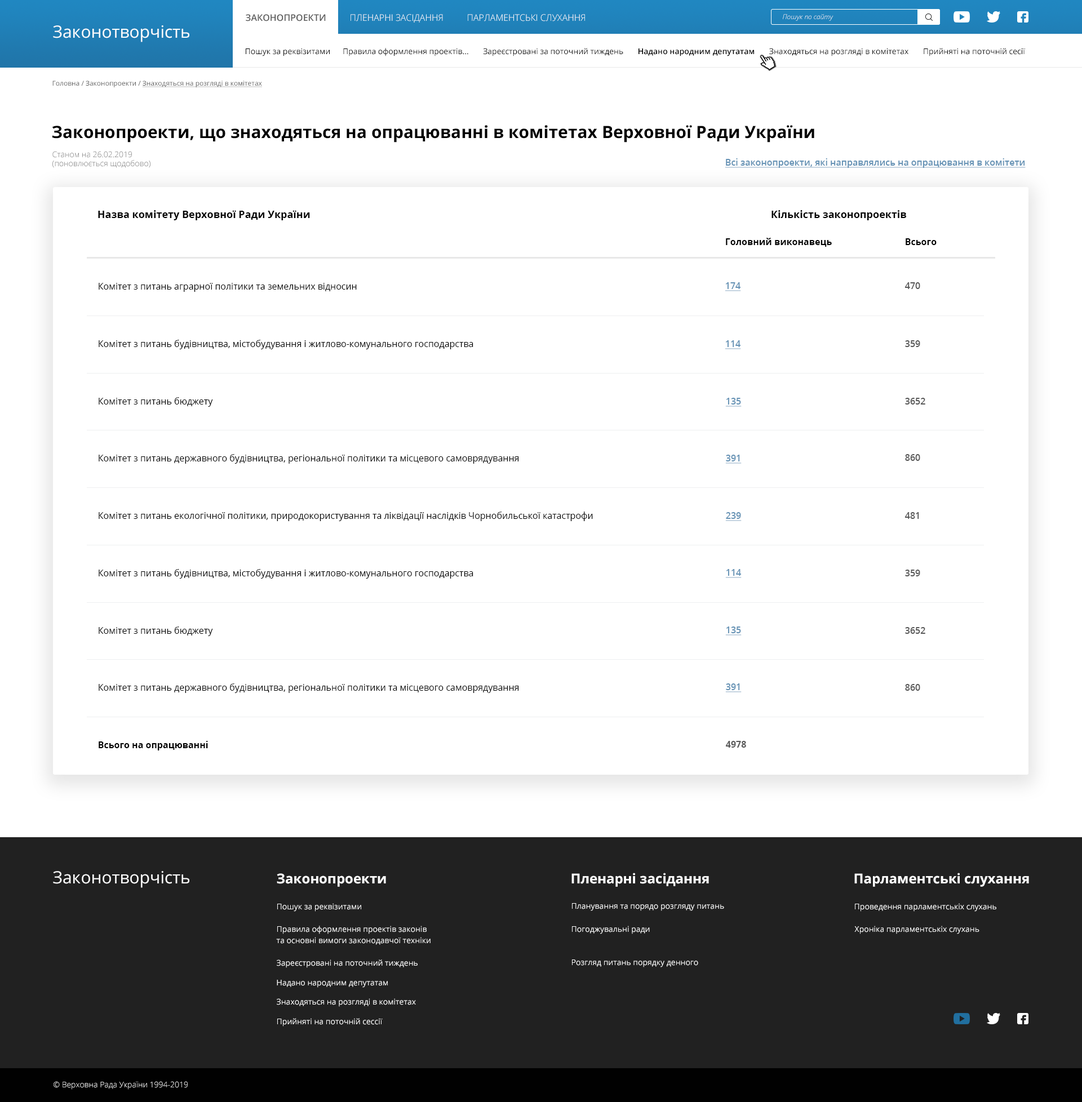
<style>
.page{position:relative;width:1082px;height:1102px;background:#ffffff}
.page>*{position:absolute;margin:0}
.t1{font:9px "OpenSans-SemiBold";color:#585858;text-transform:uppercase}
.t2{font:9px "OpenSans-Light";color:#ffffff;text-transform:uppercase}
.t3{font:6.8px "OpenSans-LightItalic";color:#ffffff}
.t4{font:16.9px "OpenSans-Regular";color:#ffffff}
.t5{font:7.9px "OpenSans-Regular";color:#000000}
.t6{font:7.9px "OpenSans-SemiBold";color:#000000}
.t7{font:6.8px "OpenSans-Regular";color:#585858;text-decoration:underline}
.t8{font:6.8px "OpenSans-Regular";color:#585858}
.t9{font:16.9px "OpenSans-Bold";color:#000000}
.t10{font:7.9px "OpenSans-Light";color:#737373}
.t11{font:9px "OpenSans-SemiBold";color:#6592b5;text-decoration:underline}
.t12{font:10.1px "OpenSans-Bold";color:#000000}
.t13{font:9px "OpenSans-Bold";color:#000000}
.t14{font:9px "OpenSans-Regular";color:#000000}
.t15{font:9px "OpenSans-SemiBold";color:#585858}
.t16{font:9px "OpenSans-Bold";color:#585858}
.t17{font:13.5px "OpenSans-Bold";color:#ffffff}
.t18{font:7.9px "OpenSans-Regular";color:#ffffff}
.t19{font:7.9px/11.3px "OpenSans-Regular";color:#ffffff}
.t20{font:7.9px/14.7px "OpenSans-Regular";color:#ffffff}
.t21{font:7.9px "OpenSans-Light";color:#ffffff}
</style>
<div class="page">
<p class="t1" style="left:246px;top:14px;width:80px;height:7px">Законопроекти</p>
<p class="t2" style="left:350px;top:14px;width:93px;height:9px">пленарні засідання</p>
<p class="t2" style="left:468px;top:14px;width:117px;height:7px">парламентські слухання</p>
<p class="t3" style="left:783px;top:14px;width:50px;height:7px">Пошук по сайту</p>
<p class="t4" style="left:53px;top:25px;width:136px;height:17px">Законотворчість</p>
<p class="t5" style="left:246px;top:48px;width:779px;height:8px">Пошук за реквізитами      Правила оформлення проектів...       Зареєстровані за поточний тиждень       <span class="t6">Надано народним депутатам</span>       Знаходяться на розгляді в комітетах       Прийняті на поточній сесії</p>
<p class="t7" style="left:52px;top:81px;width:210px;height:6px"><span class="t8">Головна / Законопроекти / </span>Знаходяться на розгляді в комітетах</p>
<p class="t9" style="left:52px;top:125px;width:762px;height:18px">Законопроекти, що знаходяться на опрацюванні в комітетах Верховної Ради України</p>
<p class="t10" style="left:52px;top:151px;width:98px;height:17px">Станом на 26.02.2019<br>(поновлюється щодобово)</p>
<p class="t11" style="left:725px;top:158px;width:301px;height:10px">Всі законопроекти, які направлялись на опрацювання в комітети</p>
<p class="t12" style="left:98px;top:210px;width:212px;height:10px">Назва комітету Верховної Ради України</p>
<p class="t12" style="left:771px;top:210px;width:135px;height:10px">Кількість законопроектів</p>
<p class="t13" style="left:726px;top:238px;width:106px;height:9px">Головний виконавець</p>
<p class="t13" style="left:906px;top:238px;width:31px;height:7px">Всього</p>
<p class="t14" style="left:99px;top:283px;width:258px;height:9px">Комітет з питань аграрної політики та земельних відносин</p>
<p class="t11" style="left:725px;top:282px;width:16px;height:9px">174</p>
<p class="t15" style="left:904px;top:282px;width:16px;height:7px">470</p>
<p class="t14" style="left:99px;top:340px;width:374px;height:9px">Комітет з питань будівництва, містобудування і житлово-комунального господарства</p>
<p class="t11" style="left:725px;top:340px;width:16px;height:9px">114</p>
<p class="t15" style="left:905px;top:340px;width:15px;height:7px">359</p>
<p class="t14" style="left:99px;top:397px;width:114px;height:10px">Комітет з питань бюджету</p>
<p class="t11" style="left:725px;top:398px;width:17px;height:9px">135</p>
<p class="t15" style="left:905px;top:398px;width:20px;height:7px">3652</p>
<p class="t14" style="left:99px;top:454px;width:420px;height:10px">Комітет з питань державного будівництва, регіональної політики та місцевого самоврядування</p>
<p class="t11" style="left:725px;top:455px;width:17px;height:9px">391</p>
<p class="t15" style="left:905px;top:454px;width:15px;height:7px">860</p>
<p class="t14" style="left:99px;top:512px;width:494px;height:9px">Комітет з питань екологічної політики, природокористування та ліквідації наслідків Чорнобильської катастрофи</p>
<p class="t11" style="left:725px;top:512px;width:17px;height:9px">239</p>
<p class="t15" style="left:904px;top:512px;width:15px;height:7px">481</p>
<p class="t14" style="left:99px;top:569px;width:374px;height:10px">Комітет з питань будівництва, містобудування і житлово-комунального господарства</p>
<p class="t11" style="left:725px;top:569px;width:17px;height:9px">114</p>
<p class="t15" style="left:905px;top:570px;width:15px;height:6px">359</p>
<p class="t14" style="left:99px;top:627px;width:114px;height:9px">Комітет з питань бюджету</p>
<p class="t11" style="left:725px;top:627px;width:17px;height:9px">135</p>
<p class="t15" style="left:905px;top:627px;width:20px;height:7px">3652</p>
<p class="t14" style="left:99px;top:684px;width:420px;height:9px">Комітет з питань державного будівництва, регіональної політики та місцевого самоврядування</p>
<p class="t11" style="left:725px;top:684px;width:17px;height:9px">391</p>
<p class="t15" style="left:905px;top:684px;width:15px;height:7px">860</p>
<p class="t13" style="left:99px;top:741px;width:109px;height:10px">Всього на опрацюванні</p>
<p class="t16" style="left:726px;top:741px;width:20px;height:7px">4978</p>
<p class="t4" style="left:53px;top:871px;width:136px;height:17px">Законотворчість</p>
<p class="t17" style="left:277px;top:873px;width:109px;height:14px">Законопроекти</p>
<p class="t17" style="left:571px;top:873px;width:138px;height:14px">Пленарні засідання</p>
<p class="t17" style="left:854px;top:873px;width:175px;height:14px">Парламентські слухання</p>
<p class="t18" style="left:277px;top:903px;width:84px;height:9px">Пошук за реквізитами</p>
<p class="t18" style="left:572px;top:903px;width:152px;height:8px">Планування та порядо розгляду питань</p>
<p class="t18" style="left:855px;top:903px;width:141px;height:9px">Проведення парламентськіх слухань</p>
<p class="t19" style="left:276px;top:926px;width:155px;height:19px"><span class="t20">Правила оформлення проектів законів<br></span>та основні вимоги законодавчої техніки</p>
<p class="t18" style="left:572px;top:926px;width:78px;height:8px">Погоджувальні ради</p>
<p class="t18" style="left:854px;top:926px;width:125px;height:8px">Хроніка парламентськіх слухань</p>
<p class="t18" style="left:277px;top:960px;width:141px;height:8px">Зареєстровані на поточний тиждень</p>
<p class="t18" style="left:572px;top:960px;width:126px;height:8px">Розгляд питань порядку денного</p>
<p class="t18" style="left:277px;top:980px;width:111px;height:8px">Надано народним депутатам</p>
<p class="t18" style="left:277px;top:998px;width:139px;height:9px">Знаходяться на розгляді в комітетах</p>
<p class="t18" style="left:277px;top:1018px;width:106px;height:9px">Прийняті на поточній сессії</p>
<p class="t21" style="left:54px;top:1081px;width:134px;height:9px">© Верховна Рада України 1994-2019</p>
</div>
